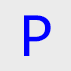
<style>
.page{position:relative;width:71px;height:71px;background:#ebebeb}
.page>*{position:absolute;margin:0}
.t1{font:64px "Consolas";color:#0000ff}
</style>
<div class="page">
<p class="t1" style="left:24px;top:15px;width:27px;height:41px">P</p>
</div>
